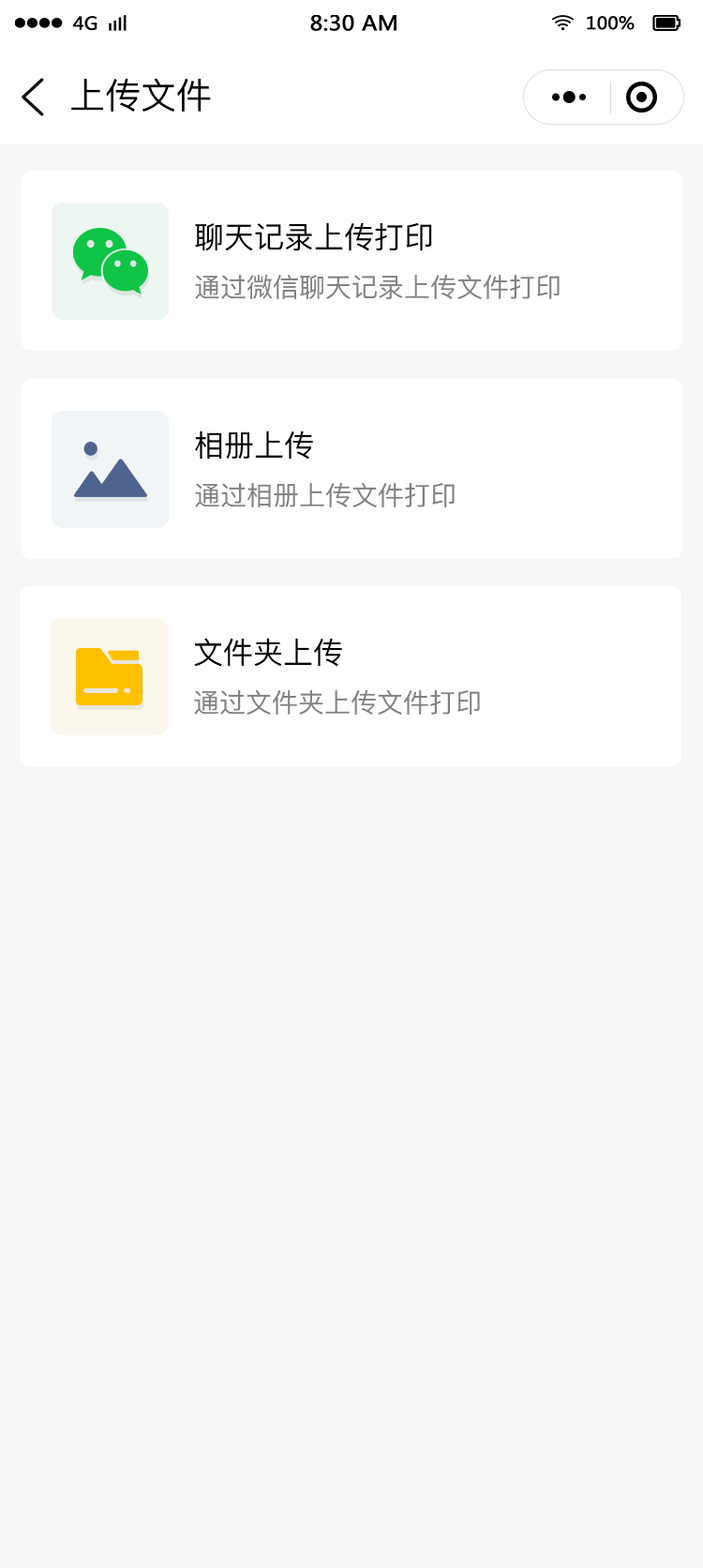
<style>
.page{position:relative;width:703px;height:1568px;background:#f7f7f7}
.page>*{position:absolute;margin:0}
.t1{font:35.6px "PingFang-SC-Medium";color:#000000}
.t2{font:30px "PingFang-SC-Medium";color:#000000}
.t3{font:26.3px "PingFang-SC-Medium";color:#828282}
</style>
<div class="page">
<p class="t1" style="left:71px;top:78px;width:140px;height:34px">上传文件</p>
<p class="t2" style="left:195px;top:222px;width:237px;height:29px">聊天记录上传打印</p>
<p class="t3" style="left:195px;top:275px;width:365px;height:24px">通过微信聊天记录上传文件打印</p>
<p class="t2" style="left:195px;top:430px;width:118px;height:30px">相册上传</p>
<p class="t3" style="left:195px;top:483px;width:260px;height:24px">通过相册上传文件打印</p>
<p class="t2" style="left:194px;top:638px;width:148px;height:29px">文件夹上传</p>
<p class="t3" style="left:194px;top:690px;width:286px;height:25px">通过文件夹上传文件打印</p>
</div>
